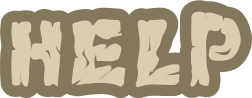
<style>
.page{position:relative;width:252px;height:98px;background:#83775c}
.page>*{position:absolute;margin:0}
.t1{font:144px "Chlorinar-Regular";color:#83775c}
</style>
<div class="page">
<p class="t1" style="left:0px;top:0px;width:252px;height:98px">help</p>
</div>
